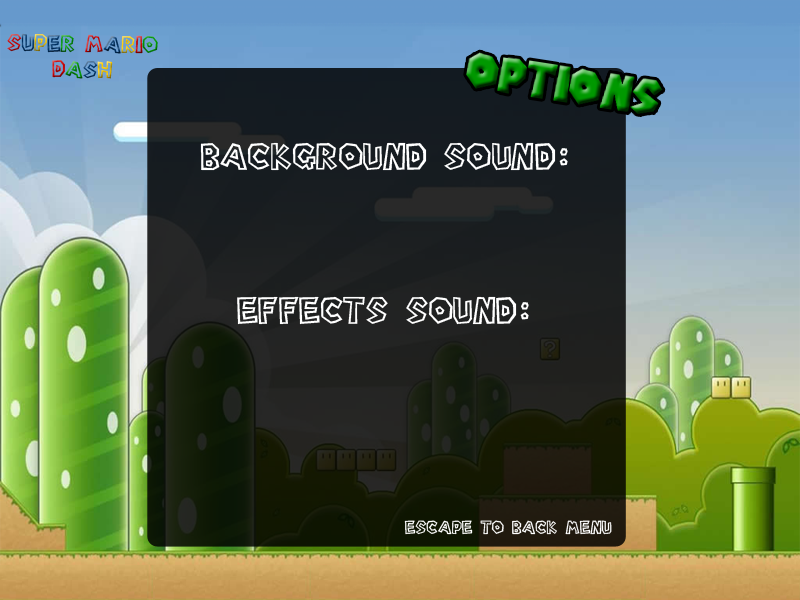
<style>
.page{position:relative;width:800px;height:600px}
.page>*{position:absolute;margin:0}
.t1{font:21.4px "Super-Mario-Bros.-Regular"}
.t2{font:33.9px "Super-Mario-Bros.-Regular";color:#ffffff}
.t3{font:16.7px "Super-Mario-Bros.-Regular";color:#ffffff}
</style>
<div class="page">
<p class="t1" style="left:7px;top:33px;width:151px;height:46px;text-align:center;rotate:1deg">SUPER MARIO<br>DASH</p>
<p class="t2" style="left:200px;top:142px;width:368px;height:29px">Background Sound:</p>
<p class="t2" style="left:237px;top:296px;width:292px;height:29px">EFFECTS Sound:</p>
<p class="t3" style="left:404px;top:520px;width:208px;height:15px">ESCAPE TO BACK MENU</p>
</div>
